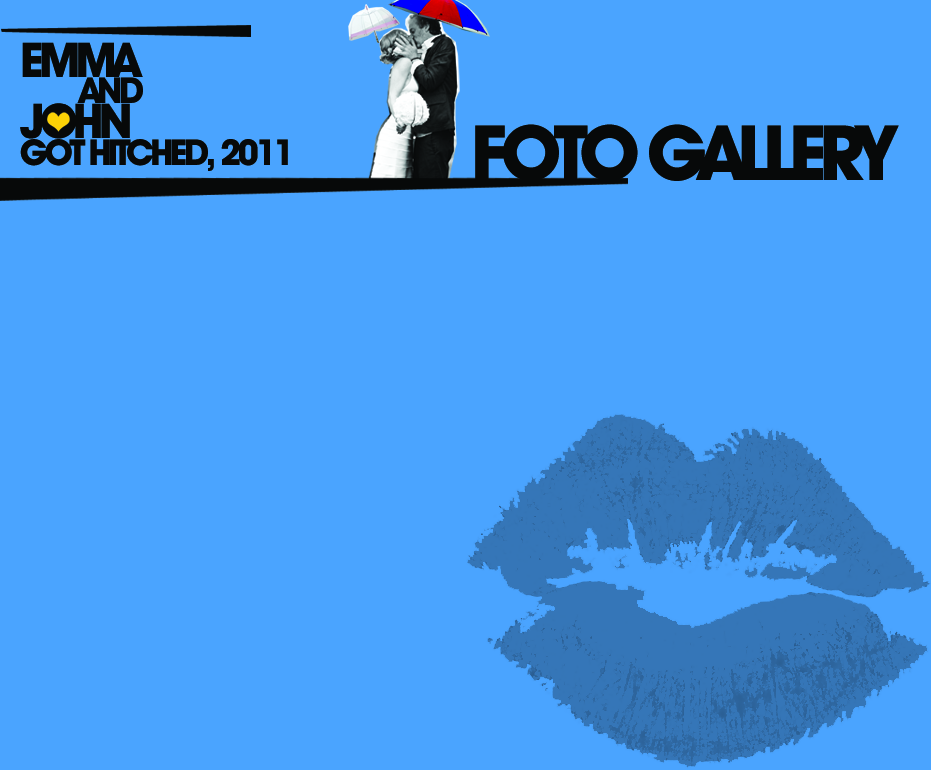
<style>
.page{position:relative;width:931px;height:770px;background:#4aa4ff}
.page>*{position:absolute;margin:0}
.t1{font:48px "AvantGardeITCbyBT-Bold";letter-spacing:-0.1em;color:#070909}
.t2{font:36px "AvantGardeITCbyBT-Bold";letter-spacing:-0.1em;color:#070909}
.t3{font:76.5px "AvantGardeITCbyBT-Bold";letter-spacing:-0.1em;color:#070909}
</style>
<div class="page">
<p class="t1" style="left:22px;top:42px;width:121px;height:35px">EMMA</p>
<p class="t2" style="left:77px;top:77px;width:66px;height:26px">AND</p>
<p class="t1" style="left:20px;top:103px;width:110px;height:36px">JOHN</p>
<p class="t3" style="left:475px;top:124px;width:424px;height:57px">FOTO GALLERY</p>
<p class="t2" style="left:20px;top:139px;width:268px;height:32px">GOT HITCHED, 2011</p>
</div>
